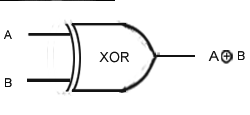
<style>
.page{position:relative;width:250px;height:115px;background:#ffffff}
.page>*{position:absolute;margin:0}
.t1{font:12px "ArialMT";color:#131313}
.t2{font:14px "ArialMT";color:#131313}
.t3{font:14px "ArialMT";color:#0d0d0d;scale:1.07 1}
.t4{font:14px "ArialMT";color:#0d0d0d;scale:0.87 1}
.t5{font:12px "ArialMT";color:#0d0d0d}
</style>
<div class="page">
<p class="t1" style="left:4px;top:30px;width:8px;height:9px">A</p>
<p class="t2" style="left:99px;top:51px;width:30px;height:12px">XOR</p>
<p class="t3" style="left:208px;top:51px;width:11px;height:10px">A</p>
<p class="t4" style="left:223px;top:52px;width:7px;height:8px">+</p>
<p class="t1" style="left:238px;top:51px;width:7px;height:9px">B</p>
<p class="t5" style="left:5px;top:78px;width:7px;height:9px">B</p>
</div>
